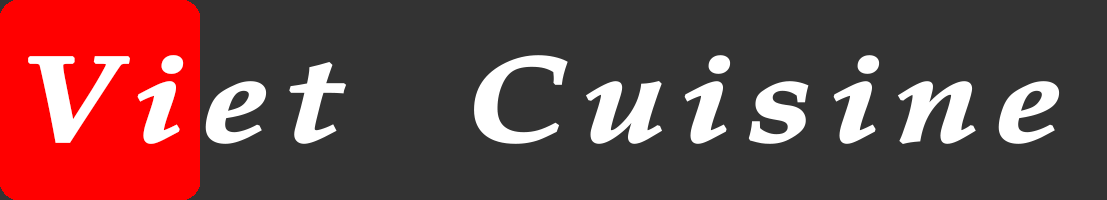
<style>
.page{position:relative;width:1107px;height:200px;background:#333333}
.page>*{position:absolute;margin:0}
.t1{font:120px "BookAntiqua-BoldItalic";letter-spacing:0.1em;color:#ffffff;font-weight:bold;scale:1.2 1}
</style>
<div class="page">
<p class="t1" style="left:28px;top:55px;width:1032px;height:89px">Viet  Cuisine</p>
</div>
